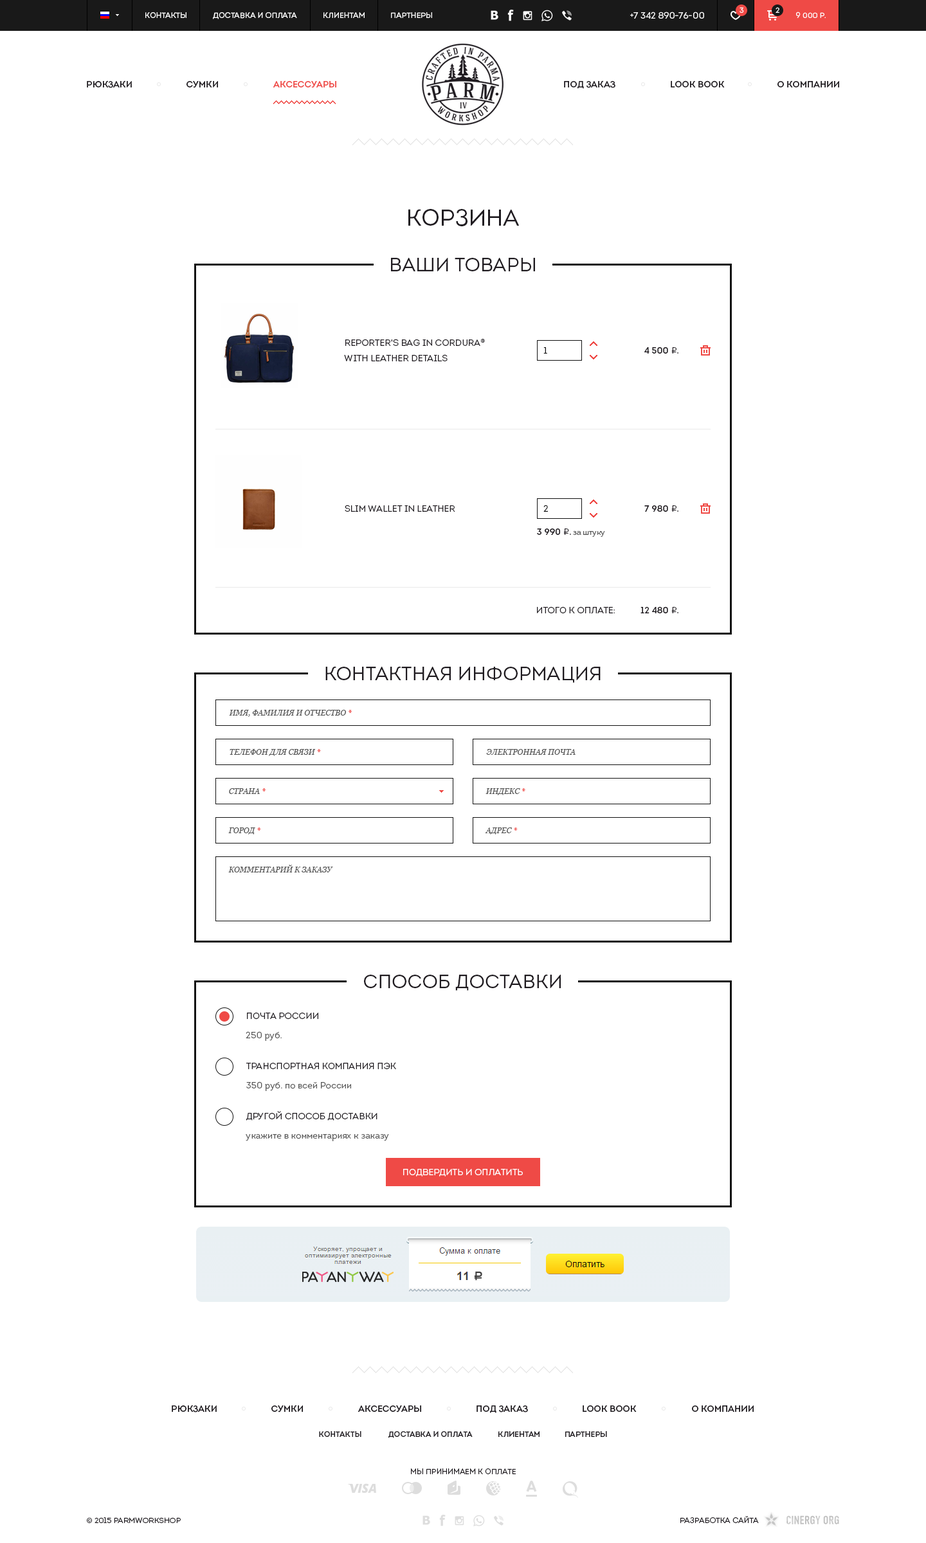
<style>
.page{position:relative;width:926px;height:1543px;background:#ffffff}
.page>*{position:absolute;margin:0}
.t1{font:7.7px "Intro-Book";color:#ffffff;text-transform:uppercase}
.t2{font:9px "Intro-Book";color:#ffffff;text-transform:uppercase}
.t3{font:7.7px "Intro-Book";letter-spacing:0.1em;color:#ffffff;text-transform:uppercase}
.t4{font:9px "Intro-Regular";color:#1f1b20;text-transform:uppercase}
.t5{font:9px "Intro-Regular";color:#ef4a46;text-transform:uppercase}
.t6{font:23.1px "Intro-Book";color:#1f1b20;text-transform:uppercase}
.t7{font:19.3px "Intro-Book";color:#1f1b20;text-transform:uppercase}
.t8{font:9px/15.4px "Intro-Book";color:#1f1b20;text-transform:uppercase}
.t9{font:9px "Intro-Book";color:#111111}
.t10{font:9px "ALSRubl";color:#1f1b20}
.t11{font:9px "MyriadPro-Regular";color:#1f1b20}
.t12{font:9px "Intro-Book";color:#1f1b20;text-transform:uppercase}
.t13{font:7.7px "Intro-Book";color:#555555}
.t14{font:7.7px "Georgia-Italic";color:#555555;text-transform:uppercase}
.t15{font:7.7px "Georgia-Italic";color:#ef4a46;text-transform:uppercase}
.t16{font:9px/19.3px "Intro-Book";color:#1f1b20;text-transform:uppercase}
.t17{font:9px/19.3px "Intro-Book";color:#555555}
.t18{font:7.7px "Intro-Regular";color:#1f1b20;text-transform:uppercase}
.t19{font:7.7px "Intro-Book";color:#1f1b20;text-transform:uppercase}
</style>
<div class="page">
<p class="t1" style="left:145px;top:12px;width:41px;height:6px">Контакты</p>
<p class="t1" style="left:213px;top:12px;width:84px;height:7px">Доставка и оплата</p>
<p class="t1" style="left:323px;top:12px;width:41px;height:6px">Клиентам</p>
<p class="t1" style="left:391px;top:12px;width:41px;height:6px">Партнеры</p>
<p class="t2" style="left:630px;top:12px;width:74px;height:7px">+7 342 890-76-00</p>
<p class="t3" style="left:739px;top:7px;width:5px;height:6px">3</p>
<p class="t3" style="left:775px;top:7px;width:4px;height:6px">2</p>
<p class="t1" style="left:796px;top:12px;width:29px;height:6px">9 000 р.</p>
<p class="t4" style="left:87px;top:80px;width:45px;height:8px">Рюкзаки</p>
<p class="t4" style="left:186px;top:80px;width:32px;height:8px">Сумки</p>
<p class="t5" style="left:273px;top:80px;width:63px;height:8px">Аксессуары</p>
<p class="t4" style="left:564px;top:80px;width:51px;height:9px">Под заказ</p>
<p class="t4" style="left:670px;top:80px;width:54px;height:7px">Look Book</p>
<p class="t4" style="left:777px;top:80px;width:62px;height:7px">О компании</p>
<p class="t6" style="left:408px;top:209px;width:111px;height:17px">Корзина</p>
<p class="t7" style="left:391px;top:258px;width:144px;height:13px">Ваши товары</p>
<p class="t8" style="left:344px;top:339px;width:141px;height:22px">Reporter's bag in Cordura®<br>with leather details</p>
<p class="t9" style="left:543px;top:347px;width:4px;height:7px">1</p>
<p class="t4" style="left:644px;top:347px;width:34px;height:7px">4 500 <span class="t10">i</span><span class="t11">.</span></p>
<p class="t12" style="left:345px;top:505px;width:110px;height:7px">Slim wallet in leather</p>
<p class="t9" style="left:543px;top:505px;width:5px;height:7px">2</p>
<p class="t4" style="left:644px;top:505px;width:34px;height:7px">7 980 <span class="t10">i</span><span class="t11">.</span></p>
<p class="t13" style="left:537px;top:528px;width:68px;height:9px"><span class="t4">3 990 </span><span class="t10">i</span><span class="t11">. </span>за штуку</p>
<p class="t12" style="left:537px;top:606px;width:78px;height:7px">Итого к оплате:</p>
<p class="t4" style="left:640px;top:606px;width:38px;height:7px">12 480 <span class="t10">i</span><span class="t11">.</span></p>
<p class="t7" style="left:325px;top:666px;width:275px;height:17px">Контактная информация</p>
<p class="t14" style="left:229px;top:710px;width:123px;height:7px">Имя, фамилия и отчество <span class="t15">*</span></p>
<p class="t14" style="left:230px;top:749px;width:91px;height:7px">Телефон для связи <span class="t15">*</span></p>
<p class="t14" style="left:486px;top:749px;width:89px;height:6px">Электронная почта</p>
<p class="t14" style="left:229px;top:788px;width:37px;height:6px">Страна <span class="t15">*</span></p>
<p class="t14" style="left:485px;top:788px;width:40px;height:7px">Индекс <span class="t15">*</span></p>
<p class="t14" style="left:228px;top:827px;width:33px;height:7px">Город <span class="t15">*</span></p>
<p class="t14" style="left:485px;top:827px;width:33px;height:7px">Адрес <span class="t15">*</span></p>
<p class="t14" style="left:228px;top:865px;width:105px;height:7px">Комментарий к заказу</p>
<p class="t7" style="left:364px;top:974px;width:197px;height:17px">Способ доставки</p>
<p class="t16" style="left:246px;top:1013px;width:72px;height:28px">Почта России<br><span class="t17">250 руб.</span></p>
<p class="t16" style="left:246px;top:1062px;width:150px;height:29px">Транспортная компания ПЭК<br><span class="t17">350 руб. по всей России</span></p>
<p class="t17" style="left:246px;top:1111px;width:143px;height:30px"><span class="t16">другой способ доставки<br></span>укажите в комментариях к заказу</p>
<p class="t2" style="left:403px;top:1169px;width:120px;height:7px">Подвердить и оплатить</p>
<p class="t4" style="left:172px;top:1405px;width:45px;height:7px">Рюкзаки</p>
<p class="t4" style="left:271px;top:1405px;width:32px;height:7px">Сумки</p>
<p class="t4" style="left:357px;top:1405px;width:64px;height:7px">Аксессуары</p>
<p class="t4" style="left:476px;top:1405px;width:52px;height:8px">Под заказ</p>
<p class="t4" style="left:582px;top:1405px;width:54px;height:7px">Look Book</p>
<p class="t4" style="left:692px;top:1405px;width:61px;height:7px">О компании</p>
<p class="t18" style="left:319px;top:1431px;width:42px;height:6px">Контакты</p>
<p class="t18" style="left:388px;top:1431px;width:85px;height:7px">Доставка и оплата</p>
<p class="t18" style="left:498px;top:1431px;width:41px;height:6px">Клиентам</p>
<p class="t18" style="left:565px;top:1431px;width:42px;height:6px">Партнеры</p>
<p class="t19" style="left:411px;top:1468px;width:105px;height:6px">Мы принимаем к оплате</p>
<p class="t19" style="left:87px;top:1517px;width:94px;height:6px">© 2015 ParmWorkShop</p>
<p class="t19" style="left:680px;top:1516px;width:79px;height:7px">Разработка сайта</p>
</div>
